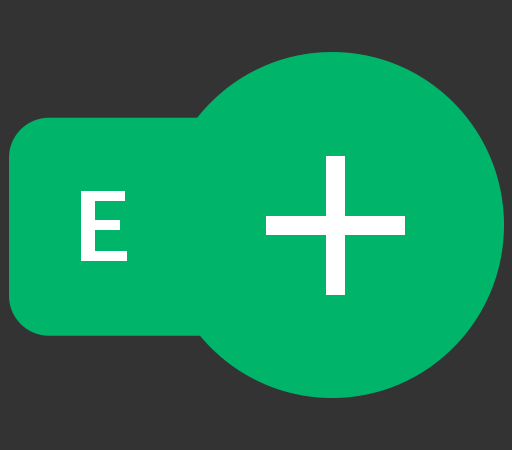
<style>
.page{position:relative;width:512px;height:450px;background:#00b46a}
.page>*{position:absolute;margin:0}
.t1{font:263px "LucidaSans";color:#ffffff}
.t2{font:96.9px "LucidaSans-Demi";color:#ffffff}
</style>
<div class="page">
<p class="t1" style="left:266px;top:156px;width:139px;height:139px">+</p>
<p class="t2" style="left:81px;top:191px;width:46px;height:70px">E</p>
</div>
